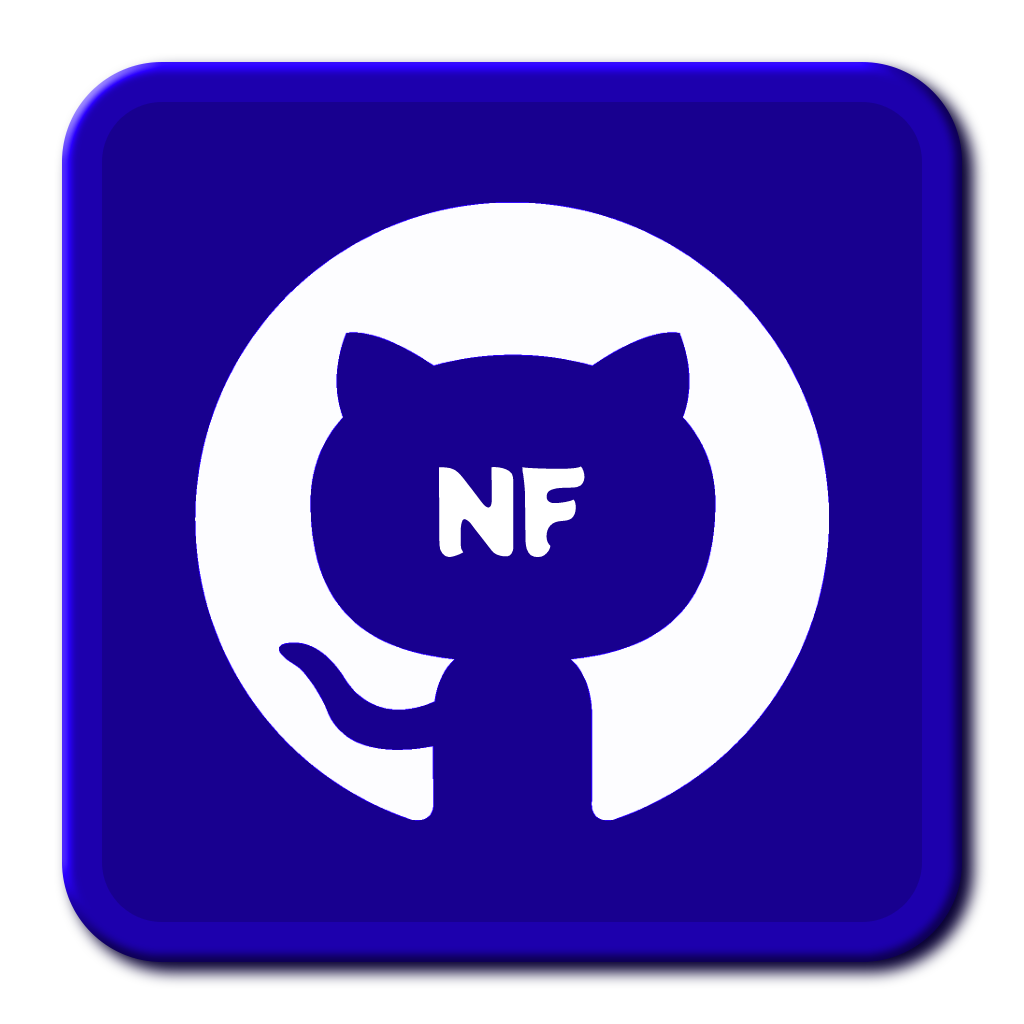
<style>
.page{position:relative;width:1024px;height:1024px;background:#18008f}
.page>*{position:absolute;margin:0}
.t1{font:112.5px "PottaOne-Regular";color:#ffffff}
</style>
<div class="page">
<p class="t1" style="left:438px;top:466px;width:147px;height:92px">NF</p>
</div>
